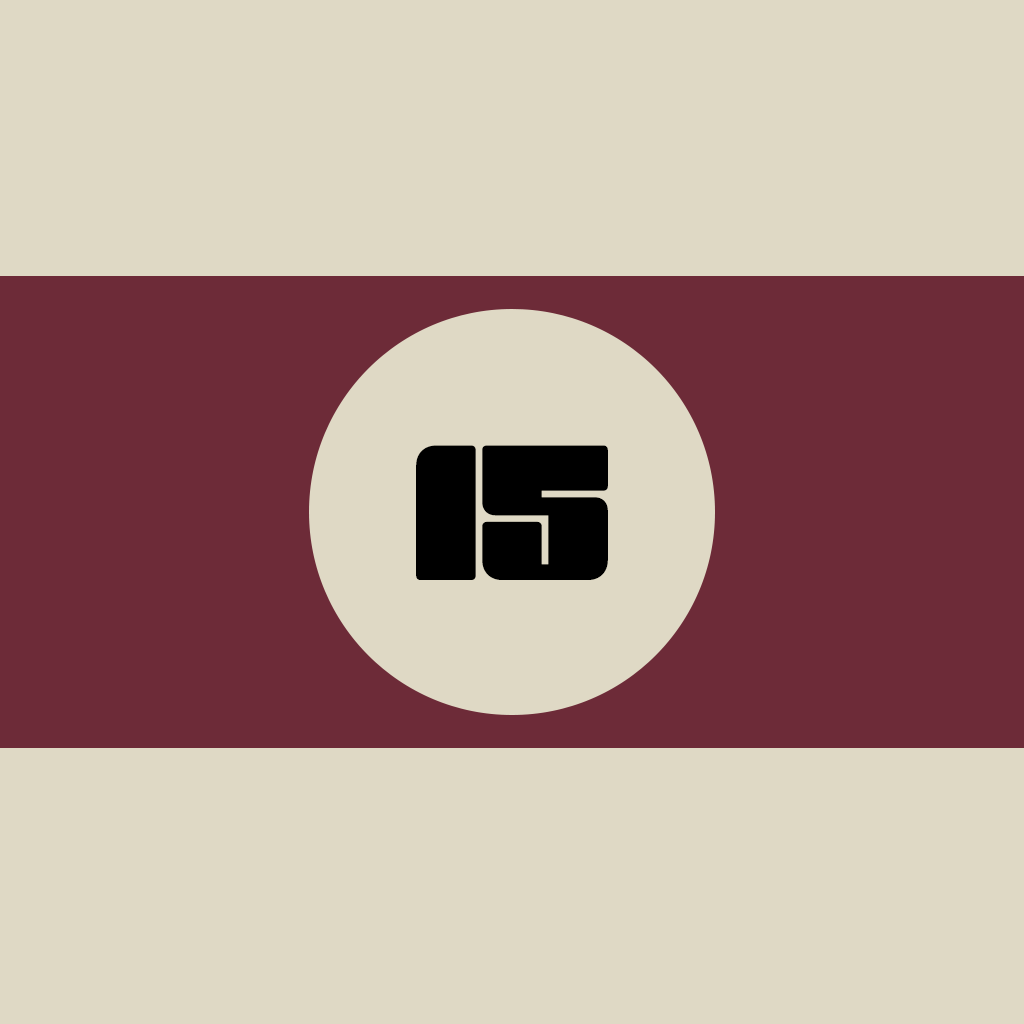
<style>
.page{position:relative;width:1024px;height:1024px;background:#dfd9c5}
.page>*{position:absolute;margin:0}
.t1{font:224px "Muscle-Narrow";color:#000000}
</style>
<div class="page">
<p class="t1" style="left:416px;top:445px;width:192px;height:135px">15</p>
</div>
